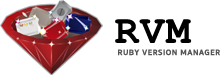
<style>
.page{position:relative;width:220px;height:75px;background:#ffffff}
.page>*{position:absolute;margin:0}
.t1{font:39.7px "CourierNewPS-BoldMT";letter-spacing:0.05em;color:#000000}
.t2{font:7.9px "SukhumvitSet-Bold";letter-spacing:0.075em;color:#555555;text-transform:uppercase}
</style>
<div class="page">
<p class="t1" style="left:115px;top:19px;width:77px;height:24px">RVM</p>
<p class="t2" style="left:118px;top:49px;width:102px;height:7px">Ruby Version Manager</p>
</div>
